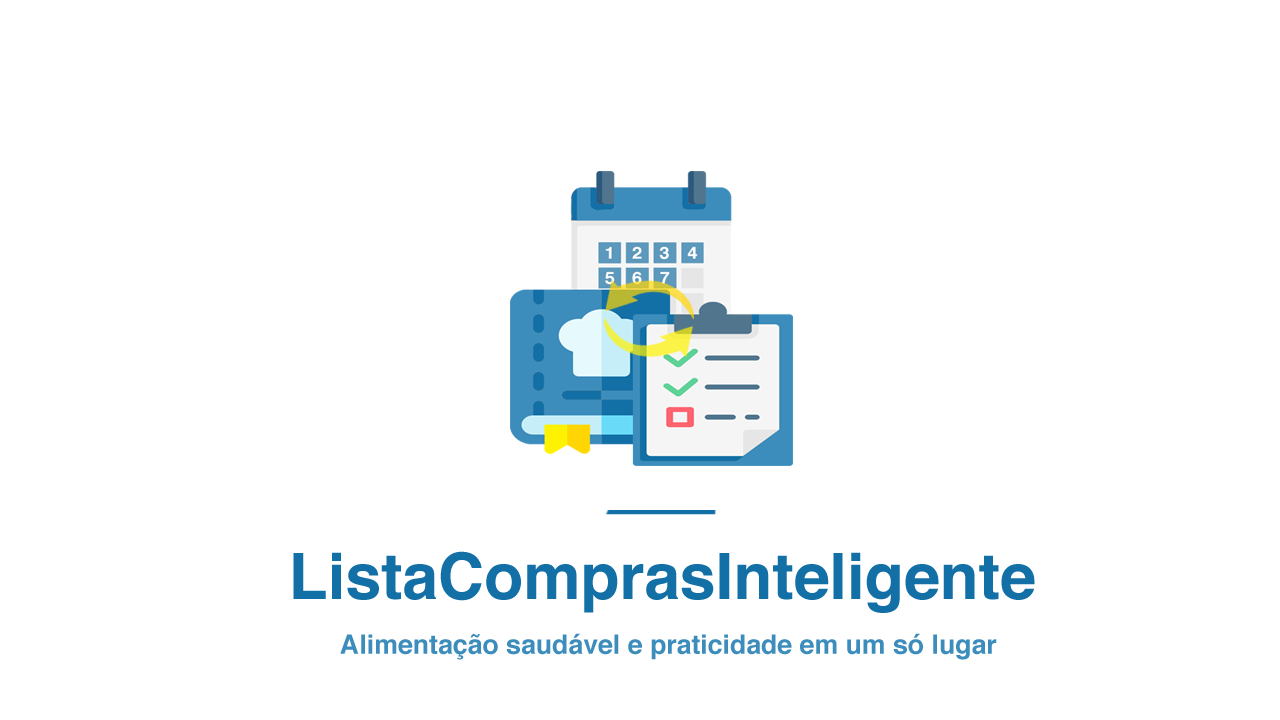
<style>
.page{position:relative;width:1280px;height:720px;background:#ffffff}
.page>*{position:absolute;margin:0}
.t1{font:64px "Helvetica-Bold";color:#1370a6}
.t2{font:26.7px "Helvetica-Bold";color:#3c8dbc}
</style>
<div class="page">
<p class="t1" style="left:293px;top:551px;width:742px;height:62px">ListaComprasInteligente</p>
<p class="t2" style="left:340px;top:633px;width:657px;height:27px">Alimentação saudável e praticidade em um só lugar</p>
</div>
